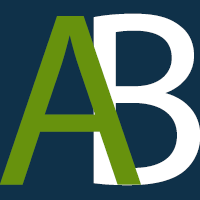
<style>
.page{position:relative;width:200px;height:200px;background:#0f3149}
.page>*{position:absolute;margin:0}
.t1{font:250px "MyriadPro-Regular";color:#67920d}
.t2{font:250px "MyriadPro-Regular";color:#ffffff}
</style>
<div class="page">
<p class="t1" style="left:0px;top:16px;width:141px;height:169px">A</p>
<p class="t2" style="left:93px;top:13px;width:108px;height:173px">B</p>
</div>
